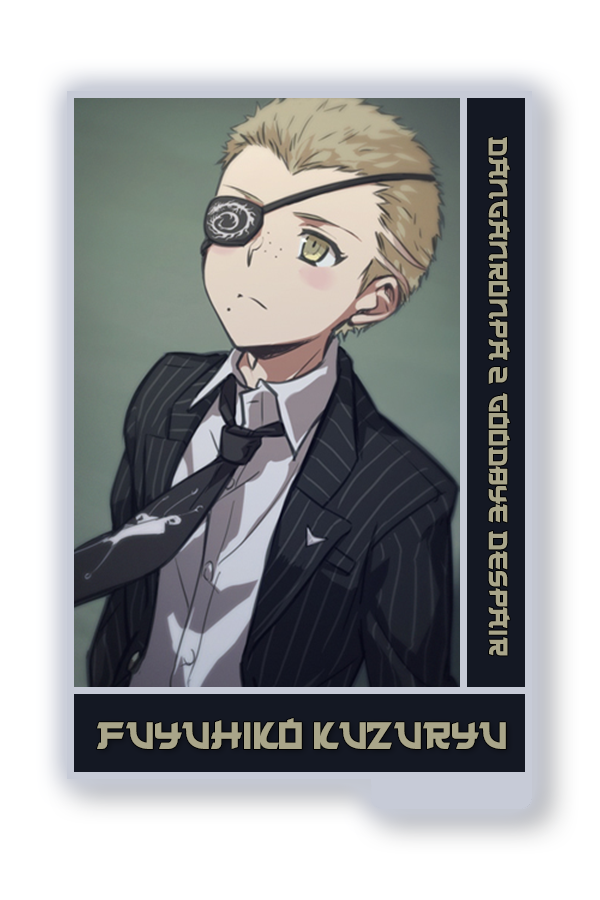
<style>
.page{position:relative;width:600px;height:900px;background:#ffffff}
.page>*{position:absolute;margin:0}
.t1{font:28.9px "Japanese2020";color:#a9a589}
.t2{font:42.2px "Japanese2020";color:#a9a589}
</style>
<div class="page">
<p class="t1" style="left:488px;top:137px;width:22px;height:519px;rotate:90deg">DANGANRONPA 2 GOODBYE DESPAIR</p>
<p class="t2" style="left:97px;top:718px;width:409px;height:31px">FUYUHIKO KUZURYU</p>
</div>
